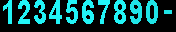
<style>
.page{position:relative;width:176px;height:32px;background:#000000}
.page>*{position:absolute;margin:0}
.t1{font:32.9px "Arial-BoldMT";color:#22f4f7;scale:0.8 1}
</style>
<div class="page">
<p class="t1" style="left:3px;top:0px;width:9px;height:24px">1</p>
<p class="t1" style="left:18px;top:0px;width:12px;height:24px">2</p>
<p class="t1" style="left:34px;top:0px;width:12px;height:24px">3</p>
<p class="t1" style="left:49px;top:0px;width:13px;height:24px">4</p>
<p class="t1" style="left:82px;top:0px;width:12px;height:24px">6</p>
<p class="t1" style="left:98px;top:0px;width:12px;height:24px">7</p>
<p class="t1" style="left:114px;top:0px;width:12px;height:24px">8</p>
<p class="t1" style="left:130px;top:0px;width:12px;height:24px;opacity:0.9">9</p>
<p class="t1" style="left:146px;top:0px;width:12px;height:24px;opacity:0.9">0</p>
</div>
